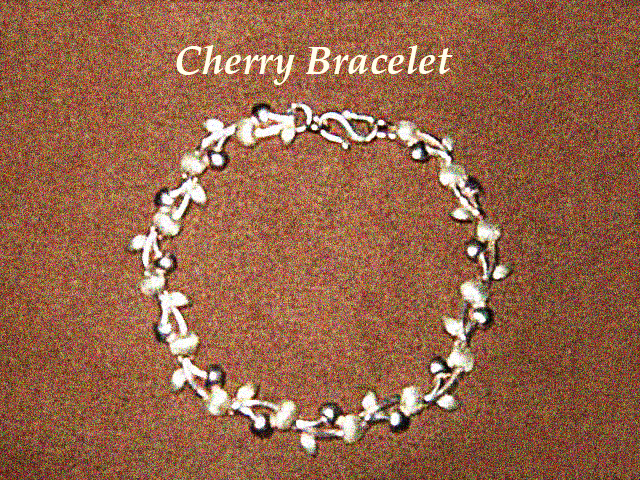
<style>
.page{position:relative;width:640px;height:480px}
.page>*{position:absolute;margin:0}
.t1{font:40px "PalatinoLinotype-BoldItalic";color:#f5f5dc}
</style>
<div class="page">
<p class="t1" style="left:176px;top:45px;width:277px;height:40px">Cherry Bracelet</p>
</div>
